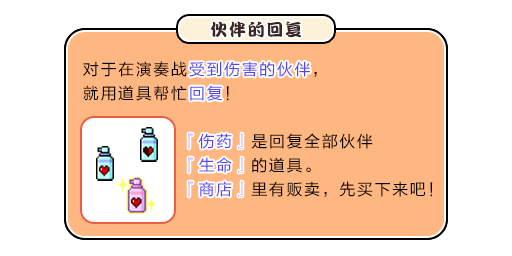
<style>
.page{position:relative;width:512px;height:256px;background:#ffffff}
.page>*{position:absolute;margin:0}
.t1{font:17px "DFPKanTingLiuW9";letter-spacing:0.1em;color:#3b2626}
.t2{font:16px/24px "FZLTHJW--GB1-0";letter-spacing:0.1em;color:#000000}
.t3{font:16px/24px "FZLTHJW--GB1-0";letter-spacing:0.1em;color:#5444ed}
.t4{font:16px "FZLTHJW--GB1-0";letter-spacing:0.1em;color:#5444ed}
</style>
<div class="page">
<p class="t1" style="left:211px;top:21px;width:91px;height:17px">伙伴的回复</p>
<p class="t2" style="left:83px;top:61px;width:234px;height:40px">对于在演奏战<span class="t3">受到伤害的伙伴</span>，<br>就用道具帮忙<span class="t3">回复</span>！</p>
<p class="t4" style="left:189px;top:61px;width:121px;height:16px">受到伤害的伙伴</p>
<p class="t4" style="left:190px;top:85px;width:32px;height:16px">回复</p>
<p class="t2" style="left:188px;top:133px;width:245px;height:64px"><span class="t3">『伤药』</span>是回复全部伙伴<br><span class="t3">『生命』</span>的道具。<br><span class="t3">『商店』</span>里有贩卖，先买下来吧！</p>
<p class="t3" style="left:188px;top:133px;width:55px;height:64px">『伤药』<br>『生命』<br>『商店』</p>
</div>
